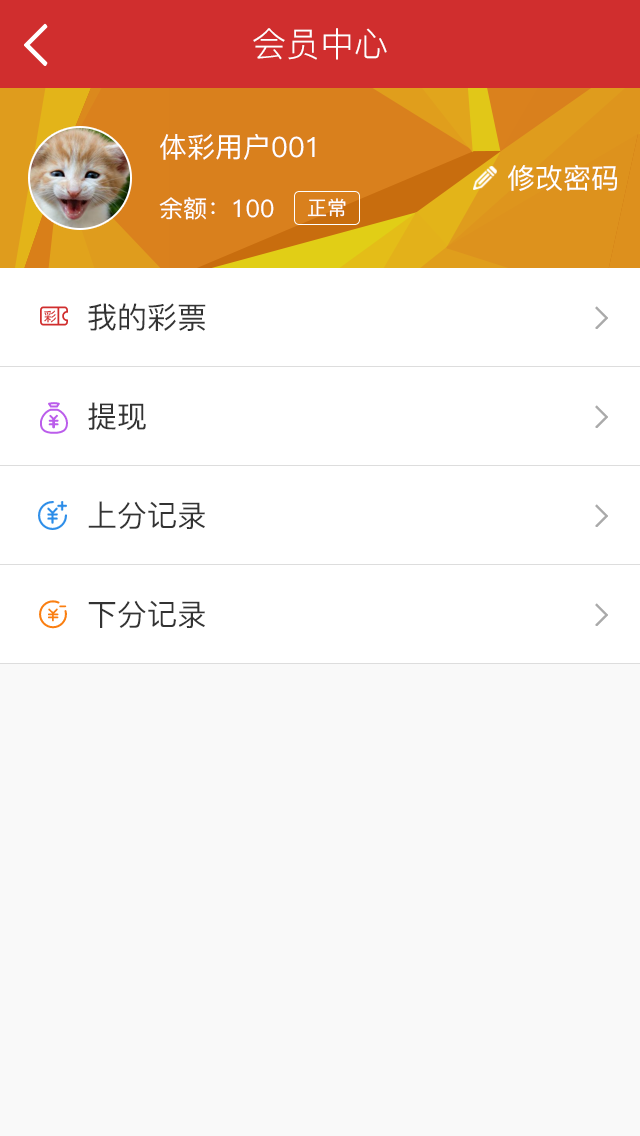
<style>
.page{position:relative;width:640px;height:1136px;background:#f9f9f9}
.page>*{position:absolute;margin:0}
.t1{font:34px "PingFang-SC-Regular";color:#ffffff}
.t2{font:28px "PingFang-SC-Medium";color:#ffffff}
.t3{font:24px "PingFang-SC-Medium";color:#ffffff}
.t4{font:20px "PingFang-SC-Medium";color:#ffffff}
.t5{font:30px "PingFang-SC-Medium";color:#333333}
</style>
<div class="page">
<p class="t1" style="left:253px;top:28px;width:134px;height:32px">会员中心</p>
<p class="t2" style="left:160px;top:134px;width:155px;height:26px">体彩用户001</p>
<p class="t2" style="left:508px;top:165px;width:109px;height:26px">修改密码</p>
<p class="t3" style="left:159px;top:197px;width:115px;height:23px">余额：100</p>
<p class="t4" style="left:307px;top:198px;width:39px;height:19px">正常</p>
<p class="t5" style="left:88px;top:303px;width:118px;height:28px">我的彩票</p>
<p class="t5" style="left:88px;top:402px;width:58px;height:28px">提现</p>
<p class="t5" style="left:88px;top:501px;width:117px;height:28px">上分记录</p>
<p class="t5" style="left:88px;top:600px;width:117px;height:28px">下分记录</p>
</div>
